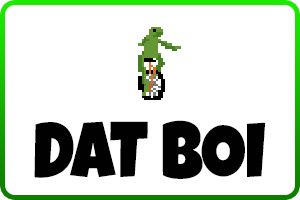
<style>
.page{position:relative;width:300px;height:200px;background:#ffffff}
.page>*{position:absolute;margin:0}
.t1{font:80.5px "LuckiestGuy-Regular";letter-spacing:-0.01em;color:#010101;text-transform:uppercase;scale:0.87 1}
</style>
<div class="page">
<p class="t1" style="left:34px;top:120px;width:232px;height:59px">dat boi</p>
</div>
